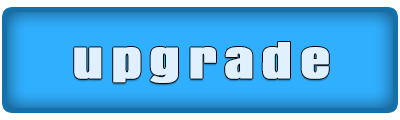
<style>
.page{position:relative;width:400px;height:120px;background:#30afff}
.page>*{position:absolute;margin:0}
.t1{font:41.7px "Anton";letter-spacing:0.125em;color:#e0f0ff;font-weight:bold;scale:1.41 1}
</style>
<div class="page">
<p class="t1" style="left:74px;top:42px;width:255px;height:41px">upgrade</p>
</div>
